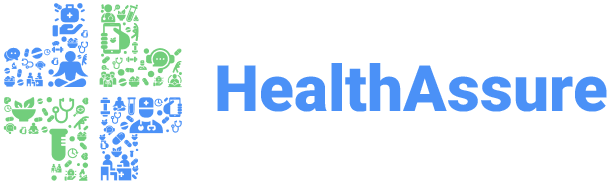
<style>
.page{position:relative;width:610px;height:184px;background:#ffffff}
.page>*{position:absolute;margin:0}
.t1{font:64px "Roboto-Black";color:#4b91f7}
</style>
<div class="page">
<p class="t1" style="left:217px;top:63px;width:390px;height:49px">HealthAssure</p>
</div>
